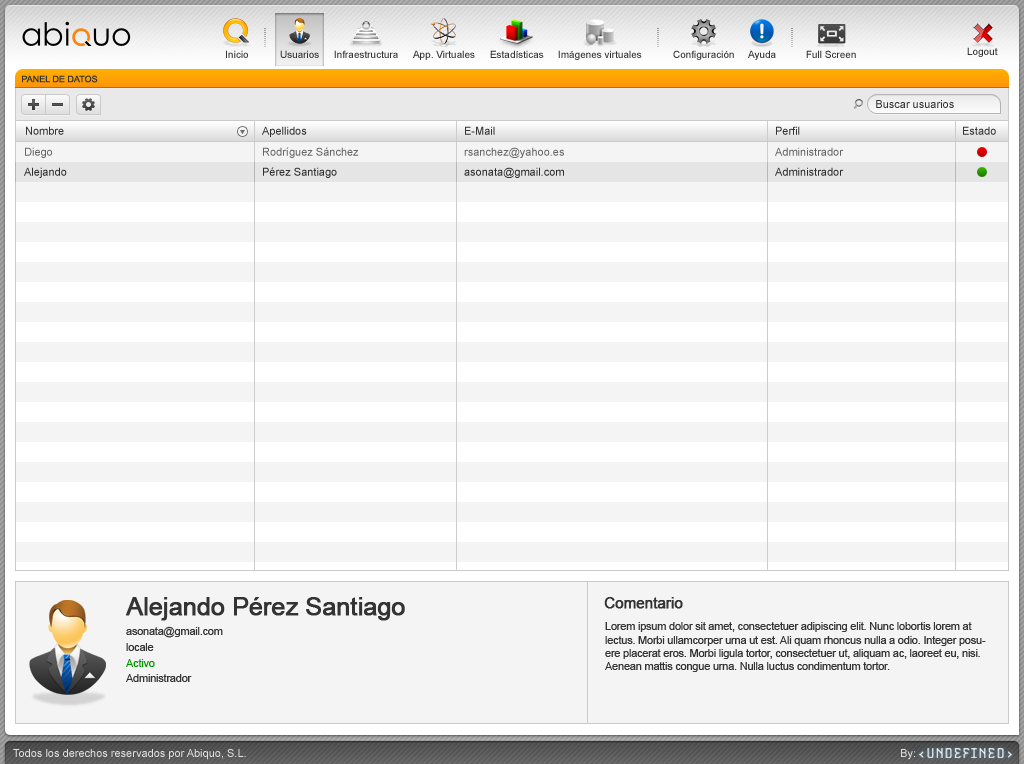
<style>
.page{position:relative;width:1024px;height:764px;background:#f4f4f4}
.page>*{position:absolute;margin:0}
.t1{font:10px "ArialMT";color:#333333}
.t2{font:9px "ArialMT";color:#333333}
.t3{font:11px "ArialMT";color:#333333}
.t4{font:11px "ArialMT";color:#666666}
.t5{font:25px "ArialMT";letter-spacing:-0.02em;color:#333333;font-weight:bold}
.t6{font:15px "ArialMT";letter-spacing:-0.02em;color:#333333;font-weight:bold}
.t7{font:11px "ArialMT";letter-spacing:-0.02em;color:#333333}
.t8{font:11px "ArialMT";letter-spacing:-0.02em;color:#009900}
.t9{font:11px "ArialMT";color:#e0e0e0}
</style>
<div class="page">
<p class="t1" style="left:226px;top:50px;width:22px;height:8px">Inicio</p>
<p class="t1" style="left:280px;top:50px;width:39px;height:8px">Usuarios</p>
<p class="t1" style="left:334px;top:50px;width:64px;height:8px">Infraestructura</p>
<p class="t1" style="left:413px;top:50px;width:62px;height:10px">App. Virtuales</p>
<p class="t1" style="left:490px;top:50px;width:54px;height:8px">Estadísticas</p>
<p class="t1" style="left:558px;top:50px;width:84px;height:10px">Imágenes virtuales</p>
<p class="t1" style="left:673px;top:50px;width:61px;height:10px">Configuración</p>
<p class="t1" style="left:748px;top:50px;width:28px;height:10px">Ayuda</p>
<p class="t1" style="left:806px;top:50px;width:50px;height:8px">Full Screen</p>
<p class="t1" style="left:967px;top:47px;width:31px;height:10px">Logout</p>
<p class="t2" style="left:22px;top:75px;width:76px;height:8px">PANEL DE DATOS</p>
<p class="t3" style="left:876px;top:100px;width:78px;height:8px">Buscar usuarios</p>
<p class="t3" style="left:26px;top:126px;width:38px;height:9px">Nombre</p>
<p class="t3" style="left:262px;top:126px;width:45px;height:11px">Apellidos</p>
<p class="t3" style="left:465px;top:126px;width:30px;height:9px">E-Mail</p>
<p class="t3" style="left:776px;top:126px;width:24px;height:9px">Perfil</p>
<p class="t3" style="left:963px;top:126px;width:33px;height:9px">Estado</p>
<p class="t4" style="left:25px;top:147px;width:27px;height:11px">Diego</p>
<p class="t4" style="left:263px;top:147px;width:96px;height:11px">Rodríguez Sánchez</p>
<p class="t4" style="left:464px;top:147px;width:100px;height:11px">rsanchez@yahoo.es</p>
<p class="t4" style="left:775px;top:147px;width:69px;height:9px">Administrador</p>
<p class="t3" style="left:24px;top:167px;width:43px;height:11px">Alejando</p>
<p class="t3" style="left:263px;top:167px;width:74px;height:11px">Pérez Santiago</p>
<p class="t3" style="left:464px;top:167px;width:100px;height:11px">asonata@gmail.com</p>
<p class="t3" style="left:775px;top:167px;width:69px;height:9px">Administrador</p>
<p class="t5" style="left:126px;top:597px;width:279px;height:24px">Alejando Pérez Santiago</p>
<p class="t6" style="left:604px;top:597px;width:79px;height:12px">Comentario</p>
<p class="t7" style="left:126px;top:626px;width:97px;height:12px">asonata@gmail.com</p>
<p class="t7" style="left:605px;top:622px;width:381px;height:50px">Lorem ipsum dolor sit amet, consectetuer adipiscing elit. Nunc lobortis lorem at lectus. Morbi ullamcorper urna ut est. Ali quam rhoncus nulla a odio. Integer posuere placerat eros. Morbi ligula tortor, consectetuer ut, aliquam ac, laoreet eu, nisi. Aenean mattis congue urna. Nulla luctus condimentum tortor.</p>
<p class="t7" style="left:126px;top:643px;width:28px;height:8px">locale</p>
<p class="t8" style="left:126px;top:659px;width:29px;height:8px">Activo</p>
<p class="t7" style="left:126px;top:674px;width:66px;height:8px">Administrador</p>
<p class="t9" style="left:13px;top:749px;width:233px;height:11px">Todos los derechos reservados por Abiquo, S.L.</p>
<p class="t9" style="left:901px;top:749px;width:14px;height:11px">By:</p>
</div>
